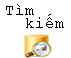
<style>
.page{position:relative;width:71px;height:58px;background:#ffffff}
.page>*{position:absolute;margin:0}
.t1{font:12px/13.3px "CourierNewPSMT";color:#000000}
</style>
<div class="page">
<p class="t1" style="left:6px;top:4px;width:58px;height:24px">Tìm<br>  kiếm</p>
</div>
